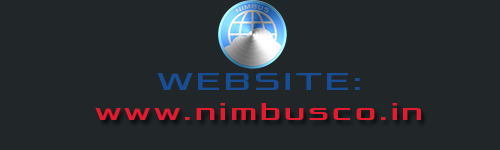
<style>
.page{position:relative;width:500px;height:150px;background:#212729}
.page>*{position:absolute;margin:0}
.t1{font:25px "Xolonium";letter-spacing:0.1em;color:#184d93;scale:1.2 1}
.t2{font:25px "Xolonium";letter-spacing:0.1em;color:#e21b2e;scale:1.2 1}
</style>
<div class="page">
<p class="t1" style="left:157px;top:73px;width:203px;height:17px">WEBSITE:</p>
<p class="t2" style="left:95px;top:103px;width:326px;height:17px">www.nimbusco.in</p>
</div>
